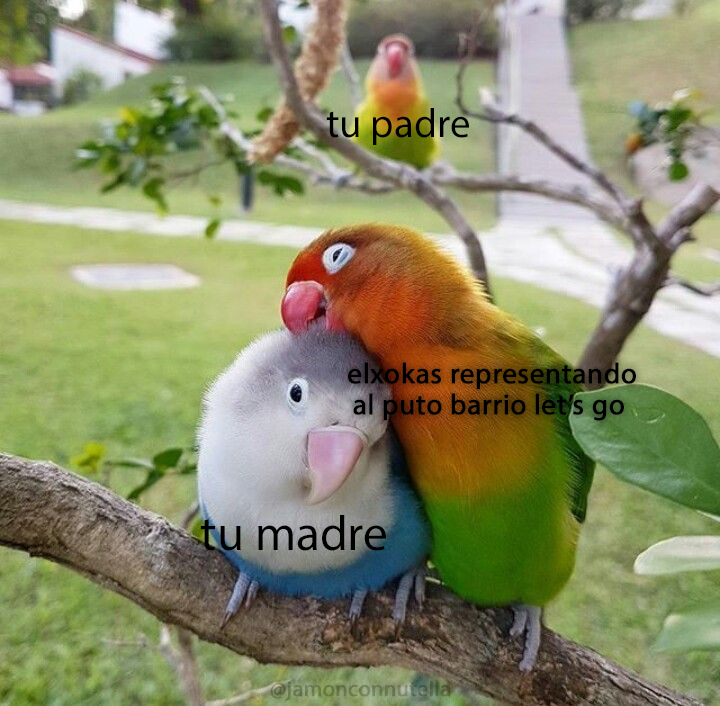
<style>
.page{position:relative;width:720px;height:706px}
.page>*{position:absolute;margin:0}
.t1{font:41px "MyriadPro-Regular";color:#000000}
.t2{font:29px "MyriadPro-Regular";color:#000000;font-weight:bold}
.t3{font:49.4px "MyriadPro-Regular";color:#000000}
.t4{font:22px "MyriadPro-Regular";color:#687651;font-weight:bold}
</style>
<div class="page">
<p class="t1" style="left:326px;top:108px;width:143px;height:37px">tu padre</p>
<p class="t2" style="left:348px;top:362px;width:288px;height:59px;text-align:center">elxokas representando<br>al puto barrio let’s go</p>
<p class="t3" style="left:200px;top:515px;width:186px;height:36px">tu madre</p>
<p class="t4" style="left:270px;top:680px;width:181px;height:21px">@jamonconnutella</p>
</div>
